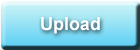
<style>
.page{position:relative;width:140px;height:50px}
.page>*{position:absolute;margin:0}
.t1{font:18px "Arial-BoldMT";color:#ffffff}
</style>
<div class="page">
<p class="t1" style="left:41px;top:17px;width:59px;height:17px">Upload</p>
</div>
